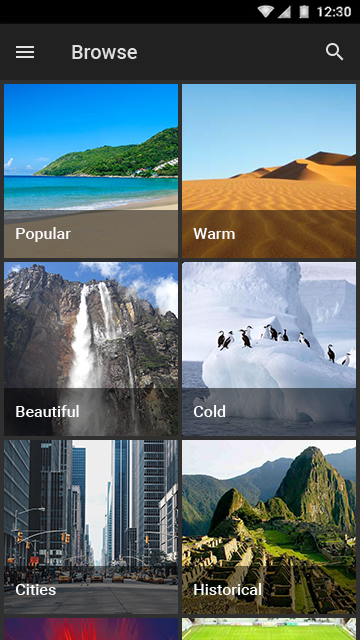
<style>
.page{position:relative;width:360px;height:640px}
.page>*{position:absolute;margin:0}
.t1{font:20px "Roboto-Medium";color:#dfdfdf}
.t2{font:16px "Roboto-Medium";color:#fbfbfb}
</style>
<div class="page">
<p class="t1" style="left:72px;top:45px;width:65px;height:14px">Browse</p>
<p class="t2" style="left:16px;top:227px;width:55px;height:15px">Popular</p>
<p class="t2" style="left:193px;top:228px;width:42px;height:11px">Warm</p>
<p class="t2" style="left:16px;top:405px;width:63px;height:12px">Beautiful</p>
<p class="t2" style="left:193px;top:405px;width:33px;height:12px">Cold</p>
<p class="t2" style="left:15px;top:584px;width:41px;height:11px">Cities</p>
<p class="t2" style="left:194px;top:583px;width:68px;height:12px">Historical</p>
</div>
